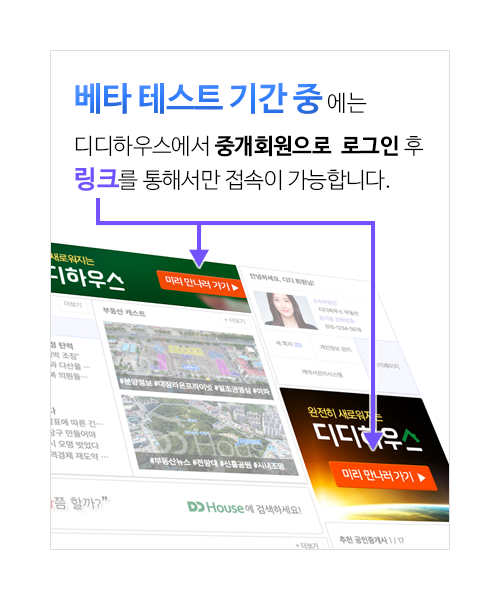
<style>
.page{position:relative;width:500px;height:600px;background:#ffffff}
.page>*{position:absolute;margin:0}
.t1{font:33px "NanumBarunGothicOTFBold";letter-spacing:-0.025em;color:#2e7dff}
.t2{font:22px "NanumBarunGothicOTFLight";color:#000000}
.t3{font:22px/32px "NanumBarunGothicOTFLight";letter-spacing:-0.01em;color:#000000}
.t4{font:22px/32px "NanumBarunGothicOTFBold";letter-spacing:-0.01em;color:#000000}
.t5{font:25px/32px "NanumBarunGothicOTFBold";letter-spacing:-0.01em;color:#7251ff}
</style>
<div class="page">
<p class="t1" style="left:75px;top:83px;width:248px;height:31px">베타 테스트 기간 중</p>
<p class="t2" style="left:327px;top:92px;width:40px;height:21px">에는</p>
<p class="t3" style="left:75px;top:135px;width:349px;height:56px">디디하우스에서 <span class="t4">중개회원으로  로그인</span> 후 <br><span class="t5">링크</span>를 통해서만 접속이 가능합니다.</p>
</div>
